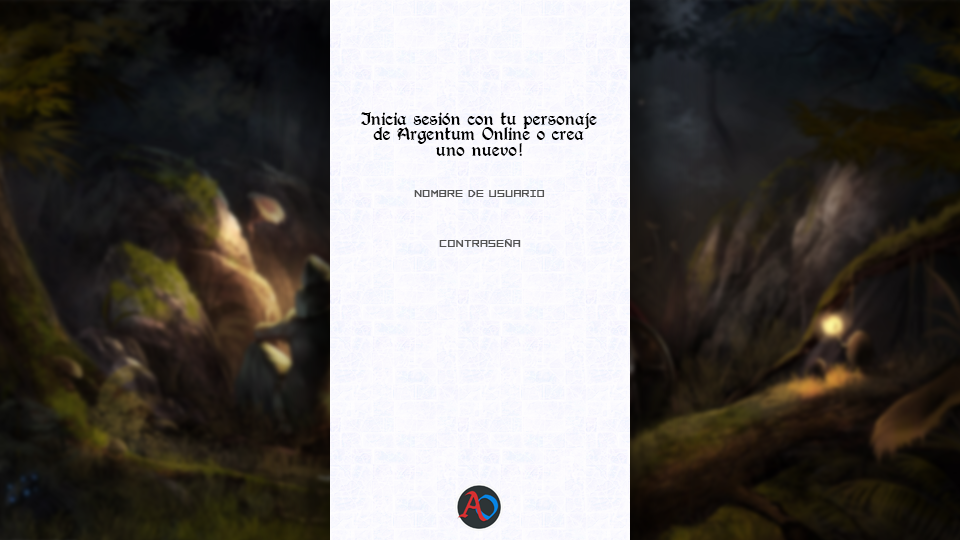
<style>
.page{position:relative;width:960px;height:540px}
.page>*{position:absolute;margin:0}
.t1{font:13px "BerryRotunda-Regular";color:#000000}
.t2{font:13px "FORCED-SQUARE";color:#535353}
</style>
<div class="page">
<p class="t1" style="left:361px;top:112px;width:236px;height:44px;text-align:center">Inicia sesión con tu personaje<br>de Argentum Online o crea<br>uno nuevo!</p>
<p class="t2" style="left:414px;top:190px;width:131px;height:7px">NOMBRE DE USUARIO</p>
<p class="t2" style="left:439px;top:239px;width:82px;height:8px">CONTRASEÑA</p>
</div>
